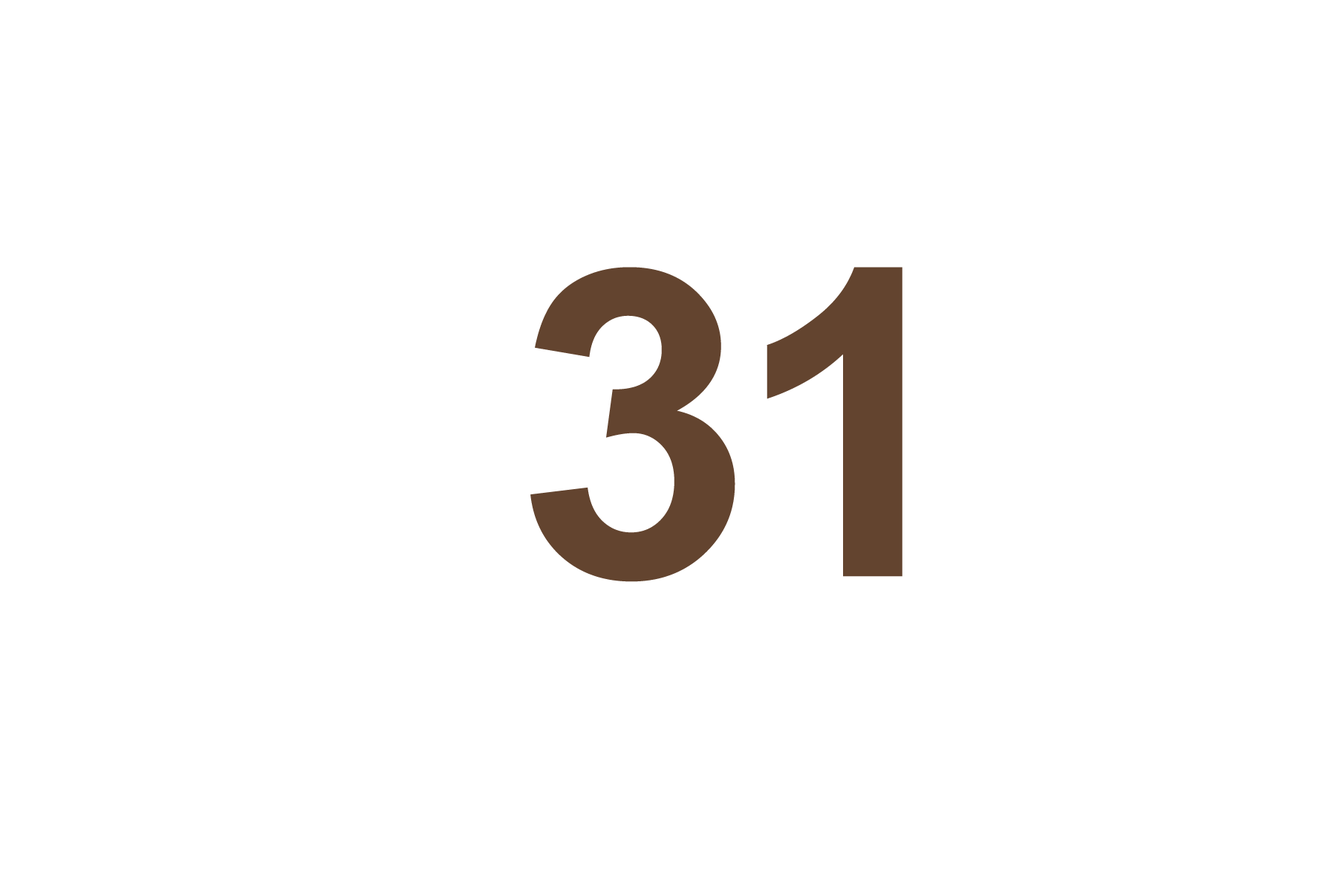
<style>
.page{position:relative;width:1337px;height:892px;background:#ffffff}
.page>*{position:absolute;margin:0}
.t1{font:429.6px "Arial-BoldMT";color:#63442f}
</style>
<div class="page">
<p class="t1" style="left:531px;top:267px;width:372px;height:315px">31</p>
</div>
